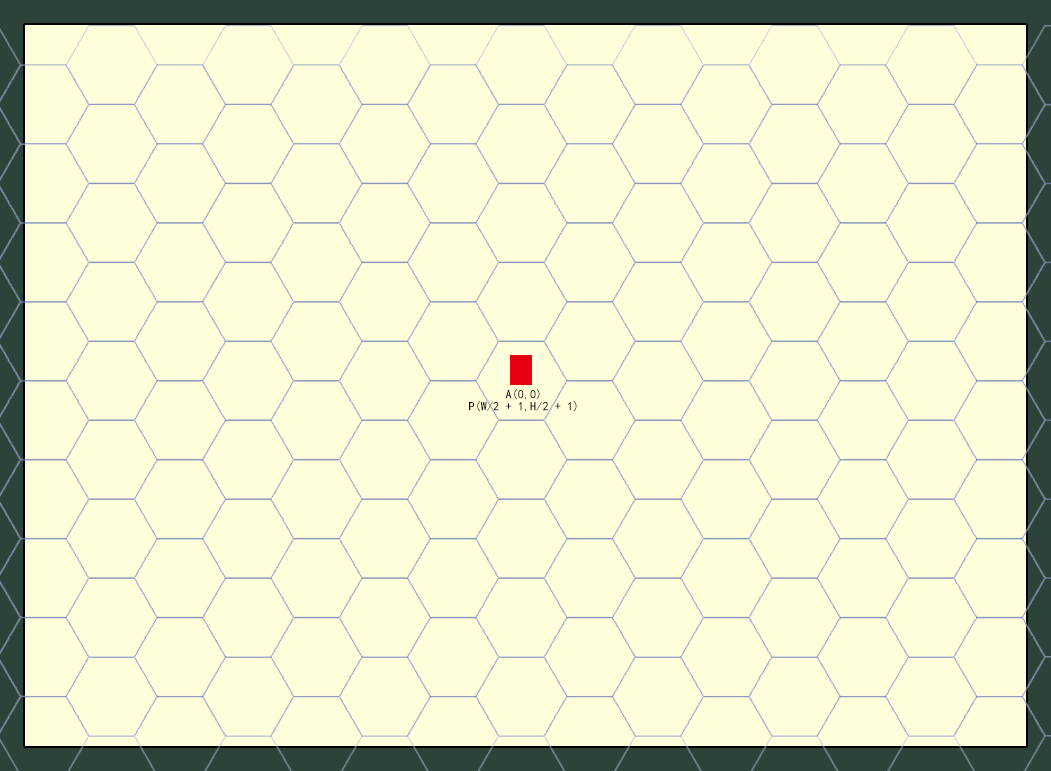
<style>
.page{position:relative;width:1051px;height:771px;background:#fffdda}
.page>*{position:absolute;margin:0}
.t1{font:12.3px/12px "SimHei";color:#000000}
</style>
<div class="page">
<p class="t1" style="left:469px;top:389px;width:108px;height:23px;text-align:center">A(0,0)<br>P(W/2 + 1,H/2 + 1)</p>
</div>
